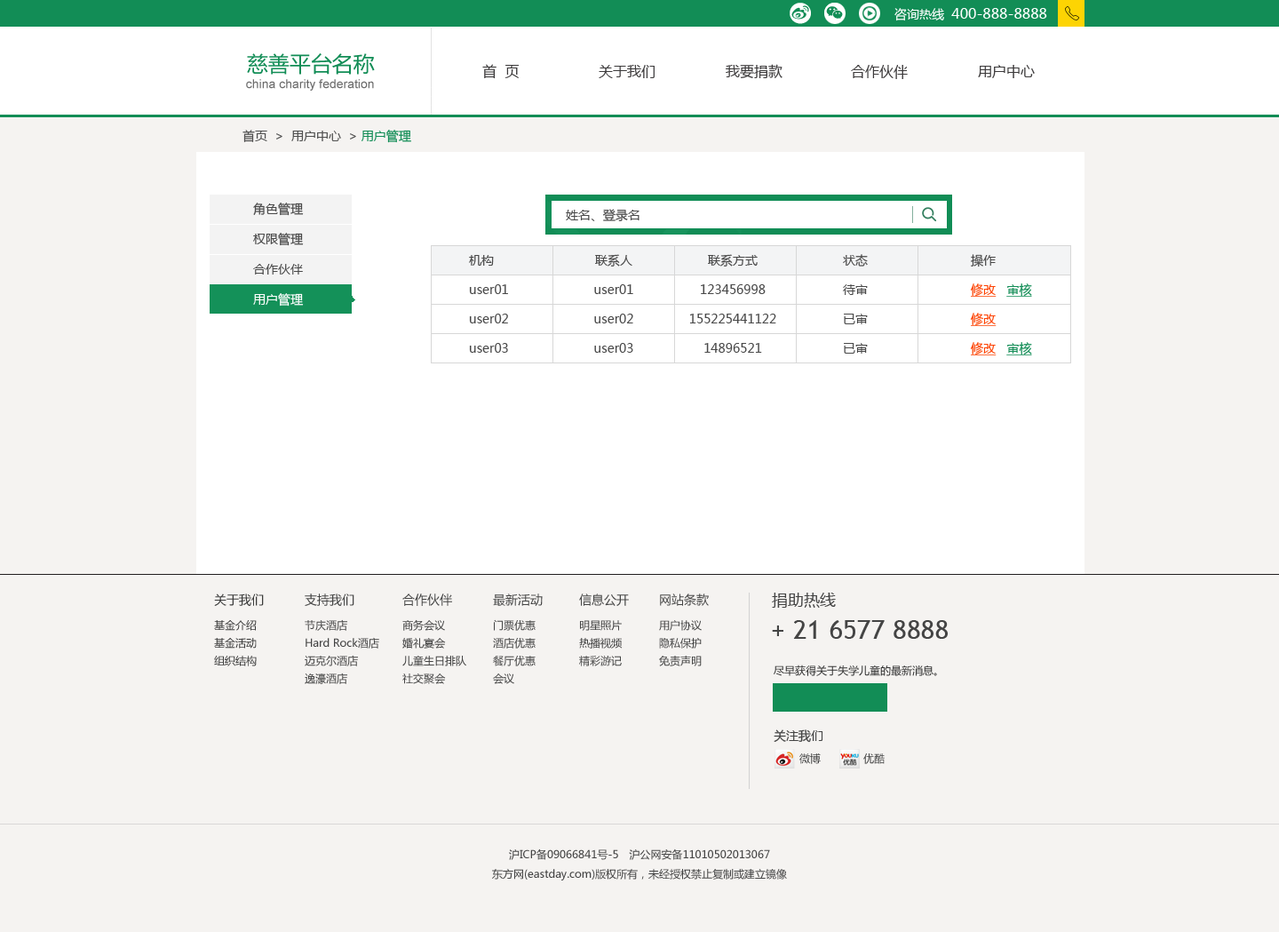
<style>
.page{position:relative;width:1279px;height:932px;background:#f5f3f1}
.page>*{position:absolute;margin:0}
.t1{font:14.2px "MicrosoftYaHei";color:#ffffff}
.t2{font:12.4px "MicrosoftYaHei";color:#ffffff}
.t3{font:21.3px "MicrosoftYaHei";color:#128d56}
.t4{font:14.2px "MicrosoftYaHei";color:#3c3a3b}
.t5{font:12.4px "ArialMT";color:#6c6c6c}
.t6{font:12.4px "MicrosoftYaHei";color:#505050}
.t7{font:12.4px "MicrosoftYaHei";color:#128d56}
.t8{font:12.4px/30.2px "MicrosoftYaHei";color:#494949}
.t9{font:12.4px/30.2px "MicrosoftYaHei";color:#ffffff}
.t10{font:12.4px "MicrosoftYaHei";color:#494949}
.t11{font:12.4px/29.3px "MicrosoftYaHei";color:#494949}
.t12{font:12.4px/29.3px "MicrosoftYaHei";color:#fd4100;text-decoration:underline}
.t13{font:12.4px/29.3px "MicrosoftYaHei";color:#128d56;text-decoration:underline}
.t14{font:10.7px/17.8px "MicrosoftYaHei";color:#3a3a3a}
.t15{font:12.4px/26.7px "MicrosoftYaHei";color:#3a3a3a}
.t16{font:10.7px/17.8px "MicrosoftYaHei";color:#444444}
.t17{font:12.4px/26.7px "MicrosoftYaHei";color:#444444}
.t18{font:16px "MicrosoftYaHei";color:#444444}
.t19{font:26.7px "TrebuchetMS";color:#444444}
.t20{font:10.7px "MicrosoftYaHei";color:#323232}
.t21{font:12.4px "MicrosoftYaHei";color:#444444}
.t22{font:10.7px "MicrosoftYaHei";color:#444444}
.t23{font:10.7px/19.5px "MicrosoftYaHei";color:#444444}
</style>
<div class="page">
<p class="t1" style="left:895px;top:8px;width:153px;height:13px"><span class="t2">咨询热线  </span>400-888-8888</p>
<p class="t3" style="left:247px;top:53px;width:128px;height:22px">慈善平台名称</p>
<p class="t4" style="left:482px;top:64px;width:38px;height:15px">首  页</p>
<p class="t4" style="left:599px;top:65px;width:56px;height:13px">关于我们</p>
<p class="t4" style="left:726px;top:64px;width:57px;height:14px">我要捐款</p>
<p class="t4" style="left:851px;top:65px;width:57px;height:14px">合作伙伴</p>
<p class="t4" style="left:978px;top:65px;width:57px;height:13px">用户中心</p>
<p class="t5" style="left:246px;top:79px;width:128px;height:12px">china charity federation</p>
<p class="t6" style="left:243px;top:130px;width:168px;height:13px">首页  &gt;  用户中心  &gt; <span class="t7">用户管理</span></p>
<p class="t8" style="left:253px;top:203px;width:51px;height:104px">角色管理<br>权限管理<br>合作伙伴<br><span class="t9">用户管理</span></p>
<p class="t10" style="left:566px;top:209px;width:74px;height:12px">姓名、登录名</p>
<p class="t11" style="left:469px;top:255px;width:39px;height:98px">机构<br>user01<br>user02<br>user03</p>
<p class="t11" style="left:594px;top:254px;width:39px;height:99px;text-align:center">联系人<br>user01<br>user02<br>user03</p>
<p class="t11" style="left:689px;top:254px;width:88px;height:99px;text-align:center">联系方式<br>123456998<br>155225441122<br>14896521</p>
<p class="t11" style="left:843px;top:254px;width:25px;height:100px;text-align:center">状态<br>待审<br>已审<br>已审</p>
<p class="t12" style="left:971px;top:254px;width:61px;height:101px"><span class="t11">操作<br></span>修改   <span class="t13">审核<br></span>修改   <br>修改   <span class="t13">审核</span></p>
<p class="t14" style="left:214px;top:594px;width:50px;height:72px"><span class="t15">关于我们 <br></span>基金介绍<br>基金活动<br>组织结构</p>
<p class="t16" style="left:305px;top:594px;width:74px;height:90px"><span class="t17">支持我们<br></span>节庆酒店<br>Hard Rock酒店<br>迈克尔酒店<br>逸濠酒店</p>
<p class="t16" style="left:402px;top:594px;width:64px;height:90px"><span class="t17">合作伙伴<br></span>商务会议<br>婚礼宴会<br>儿童生日排队<br>社交聚会</p>
<p class="t16" style="left:493px;top:594px;width:50px;height:90px"><span class="t17">最新活动<br></span>门票优惠<br>酒店优惠<br>餐厅优惠<br>会议</p>
<p class="t16" style="left:579px;top:594px;width:50px;height:72px"><span class="t17">信息公开<br></span>明星照片<br>热播视频<br>精彩游记</p>
<p class="t16" style="left:659px;top:594px;width:50px;height:72px"><span class="t17">网站条款<br></span>用户协议<br>隐私保护<br>免责声明</p>
<p class="t18" style="left:772px;top:593px;width:64px;height:15px">捐助热线</p>
<p class="t19" style="left:772px;top:620px;width:176px;height:19px">+ 21 6577 8888</p>
<p class="t20" style="left:774px;top:665px;width:163px;height:11px">尽早获得关于失学儿童的最新消息。</p>
<p class="t21" style="left:774px;top:729px;width:50px;height:14px">关注我们</p>
<p class="t22" style="left:800px;top:753px;width:21px;height:11px">微博</p>
<p class="t22" style="left:864px;top:753px;width:21px;height:11px">优酷</p>
<p class="t23" style="left:492px;top:848px;width:295px;height:32px;text-align:center">沪ICP备09066841号-5　沪公网安备11010502013067<br>东方网(eastday.com)版权所有，未经授权禁止复制或建立镜像</p>
</div>
